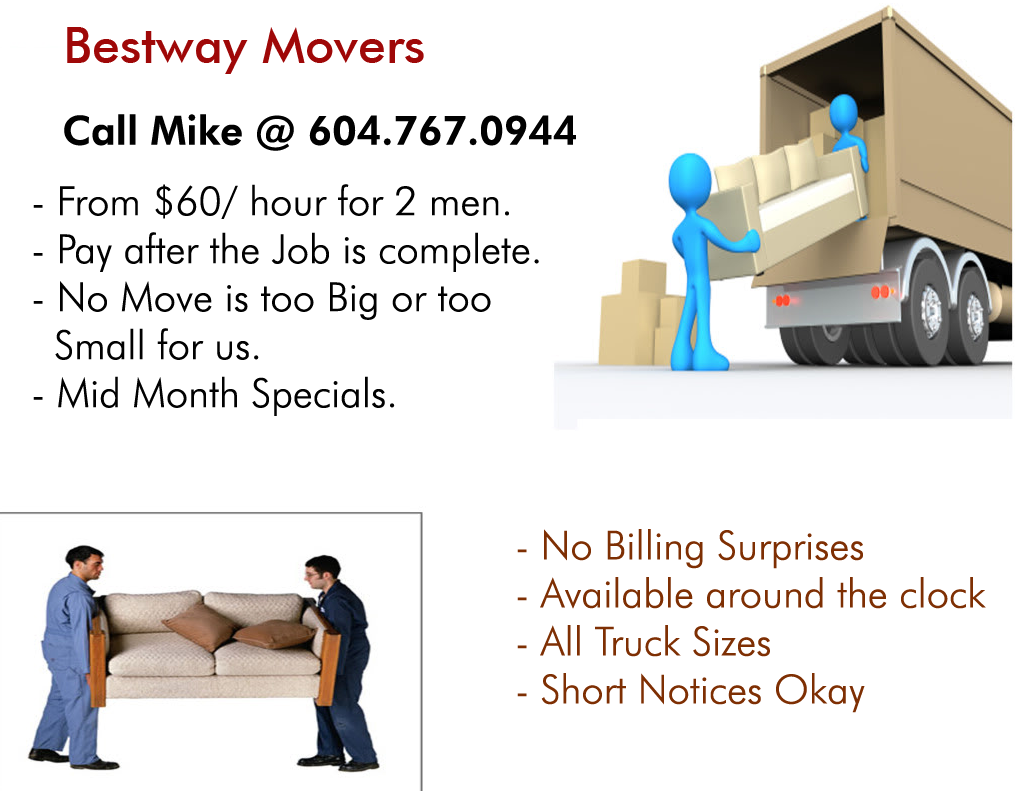
<style>
.page{position:relative;width:1024px;height:791px;background:#ffffff}
.page>*{position:absolute;margin:0}
.t1{font:50px "FuturaBT-Medium";color:#9f0808}
.t2{font:40px "FuturaBT-Heavy";color:#010101}
.t3{font:40px "FuturaBT-Light";color:#010101}
.t4{font:40px "FuturaBT-Light";color:#7e2f03}
</style>
<div class="page">
<p class="t1" style="left:67px;top:27px;width:357px;height:47px">Bestway Movers</p>
<p class="t2" style="left:64px;top:114px;width:512px;height:37px">Call Mike @ 604.767.0944</p>
<p class="t3" style="left:33px;top:184px;width:506px;height:232px">- From $60/ hour for 2 men.<br>- Pay after the Job is complete.<br>- No Move is too Big or too<br>  Small for us. <br>- Mid Month Specials.</p>
<p class="t4" style="left:517px;top:529px;width:469px;height:184px">- No Billing Surprises<br>- Available around the clock <br>- All Truck Sizes<br>- Short Notices Okay</p>
</div>
